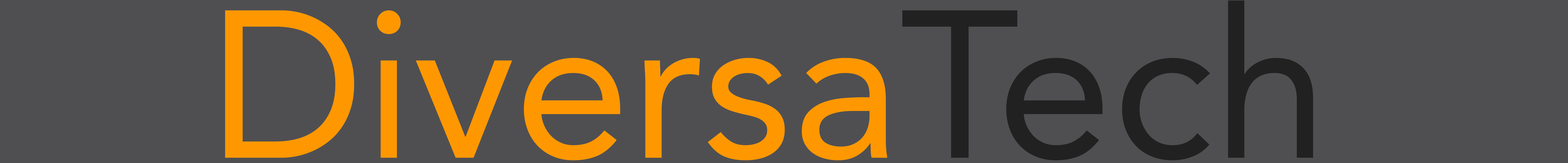
<style>
.page{position:relative;width:1568px;height:163px;background:#4f4f51}
.page>*{position:absolute;margin:0}
.t1{font:208.2px "Avenir-Roman";color:#ff9800}
.t2{font:208.2px "Avenir-Roman";color:#212121}
</style>
<div class="page">
<p class="t1" style="left:225px;top:0px;width:1088px;height:161px">Diversa<span class="t2">Tech</span></p>
</div>
